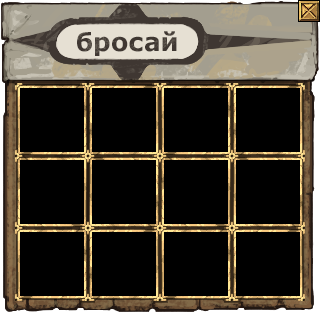
<style>
.page{position:relative;width:320px;height:320px;background:#000000}
.page>*{position:absolute;margin:0}
.t1{font:25px "Verdana-Bold";letter-spacing:0.01em;color:#3f3732}
</style>
<div class="page">
<p class="t1" style="left:77px;top:31px;width:100px;height:25px">бросай</p>
</div>
